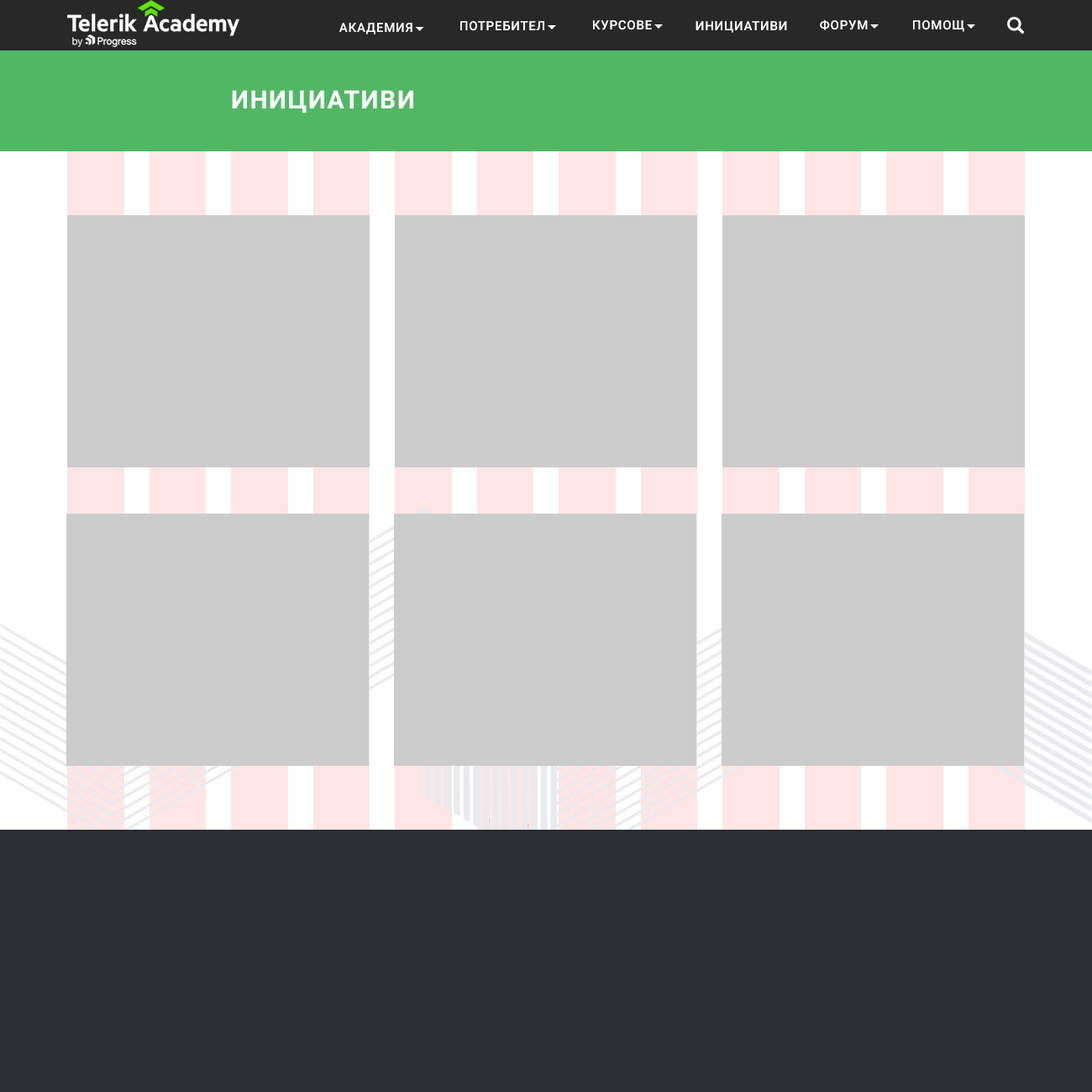
<style>
.page{position:relative;width:1092px;height:1092px;background:#cccccc}
.page>*{position:absolute;margin:0}
.t1{font:12.6px "Roboto-Medium";letter-spacing:0.05em;color:#ffffff;text-transform:uppercase}
.t2{font:12.6px "Webdings";letter-spacing:0.05em;color:#ffffff;text-transform:uppercase}
.t3{font:25.2px "Roboto-Bold";letter-spacing:0.05em;color:#ffffff;text-transform:uppercase}
</style>
<div class="page">
<p class="t1" style="left:339px;top:23px;width:85px;height:11px">АКАДЕМИЯ<span class="t2">6</span></p>
<p class="t1" style="left:460px;top:21px;width:96px;height:10px">потребител<span class="t2">6</span></p>
<p class="t1" style="left:593px;top:20px;width:70px;height:10px">КУРСОВЕ<span class="t2">6</span></p>
<p class="t1" style="left:696px;top:21px;width:91px;height:12px">ИНИЦИАТИВИ</p>
<p class="t1" style="left:820px;top:20px;width:59px;height:10px">Форум<span class="t2">6</span></p>
<p class="t1" style="left:913px;top:20px;width:63px;height:12px">Помощ<span class="t2">6</span></p>
<p class="t3" style="left:232px;top:90px;width:181px;height:23px">ИНИЦИАТИВИ</p>
</div>
